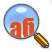
<style>
.page{position:relative;width:52px;height:52px;background:#ffffff}
.page>*{position:absolute;margin:0}
.t1{font:25px "Impact";color:#df4f1c}
</style>
<div class="page">
<p class="t1" style="left:10px;top:18px;width:25px;height:20px">аб</p>
</div>
